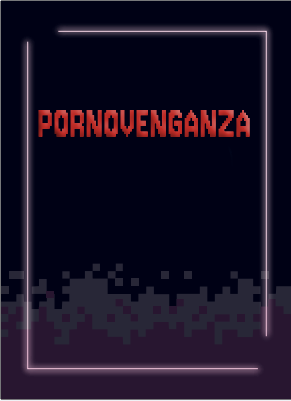
<style>
.page{position:relative;width:291px;height:401px;background:#000115}
.page>*{position:absolute;margin:0}
.t1{font:50px "Jersey10-Regular";letter-spacing:0.025em;scale:0.69 1}
</style>
<div class="page">
<p class="t1" style="left:38px;top:109px;width:212px;height:28px">PORNOVENGANZA</p>
</div>
